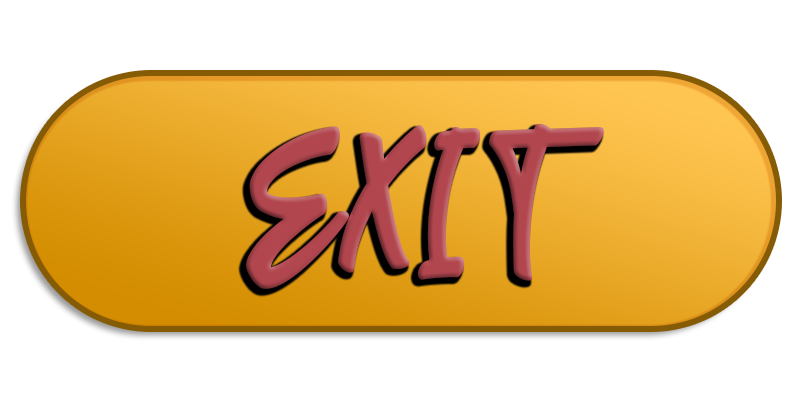
<style>
.page{position:relative;width:800px;height:400px;background:#ffffff}
.page>*{position:absolute;margin:0}
.t1{font:208.3px "EightiesFREE";color:#b1464e}
</style>
<div class="page">
<p class="t1" style="left:246px;top:123px;width:358px;height:166px">EXIT</p>
</div>
